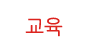
<style>
.page{position:relative;width:93px;height:53px;background:#ffffff}
.page>*{position:absolute;margin:0}
.t1{font:19.9px "NanumGothic";color:#dc241f}
</style>
<div class="page">
<p class="t1" style="left:25px;top:17px;width:38px;height:20px">교육</p>
</div>
